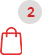
<style>
.page{position:relative;width:42px;height:55px;background:#ffffff}
.page>*{position:absolute;margin:0}
.t1{font:16px "SourceSansPro-SemiBold";color:#d12526;text-transform:uppercase}
</style>
<div class="page">
<p class="t1" style="left:27px;top:7px;width:8px;height:10px">2</p>
</div>
